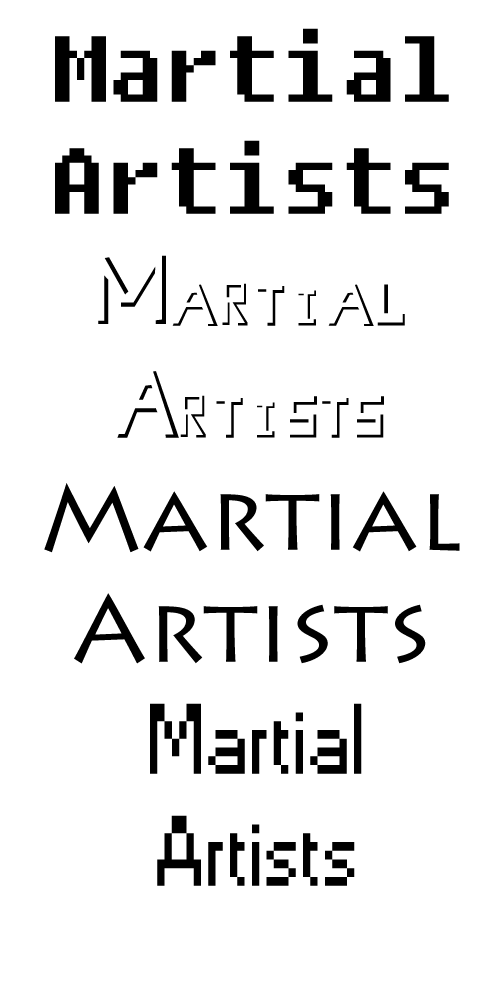
<style>
.page{position:relative;width:500px;height:1000px;background:#ffffff}
.page>*{position:absolute;margin:0}
.t1{font:93.3px "Fixedsys";color:#000000}
.t2{font:93.3px "Illusion:-?";color:#000000}
.t3{font:93.3px "LithosPro-Regular";color:#000000}
.t4{font:93.3px "Small Fonts";color:#000000}
</style>
<div class="page">
<p class="t1" style="left:44px;top:28px;width:416px;height:858px;text-align:center">Martial<br>Artists<br><span class="t2">Martial<br>Artists<br></span><span class="t3">Martial<br>Artists<br></span><span class="t4">Martial<br>Artists</span></p>
</div>
